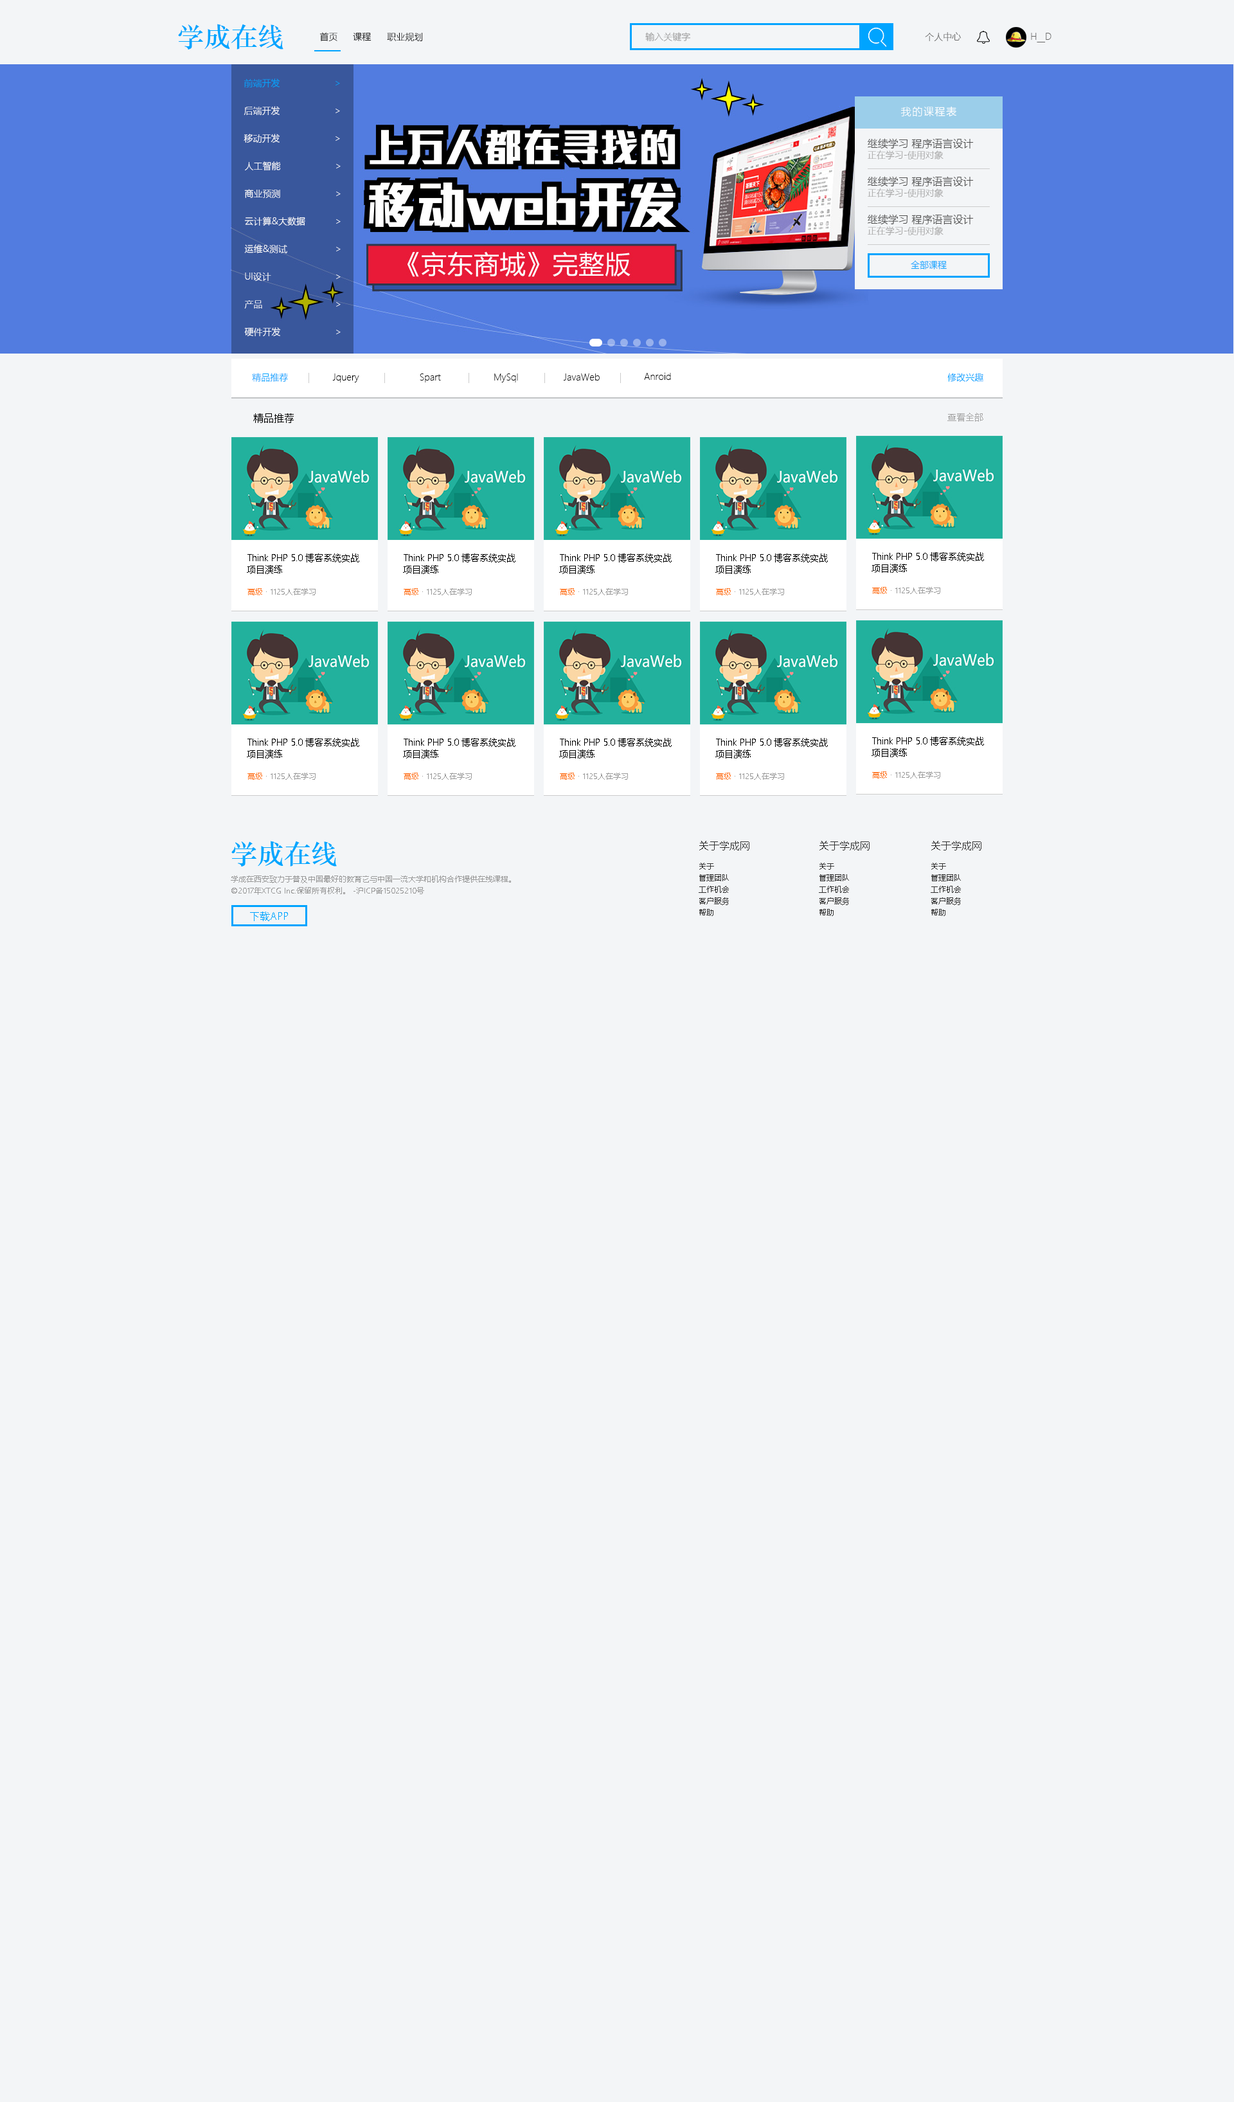
<style>
.page{position:relative;width:1234px;height:2102px;background:#f3f5f7}
.page>*{position:absolute;margin:0}
.t1{font:27px "STZhongsong";color:#00a5ff}
.t2{font:9px "MicrosoftYaHeiLight";color:#050505}
.t3{font:9px "MicrosoftYaHeiLight"}
.t4{font:9px "MicrosoftYaHeiLight";color:#999999}
.t5{font:9px "MicrosoftYaHeiLight";color:#666666}
.t6{font:9px "MicrosoftYaHeiLight";color:#00a4ff}
.t7{font:9px "MicrosoftYaHeiLight";color:#ffffff}
.t8{font:10.3px "MicrosoftYaHeiLight";letter-spacing:0.1em;color:#ffffff}
.t9{font:10.3px/11.6px "MicrosoftYaHeiLight";color:#4e4e4e}
.t10{font:9px/11.6px "MicrosoftYaHeiLight";color:#a5a5a5}
.t11{font:9px "MicrosoftYaHeiLight";color:#000000}
.t12{font:10.3px "MicrosoftYaHeiLight";color:#000000}
.t13{font:9px "MicrosoftYaHeiLight";color:#a5a5a5}
.t14{font:9px/11.6px "MicrosoftYaHeiLight";color:#000000}
.t15{font:7.7px "MicrosoftYaHeiLight";color:#999999}
.t16{font:7.7px "MicrosoftYaHeiLight";color:#ff7c2d}
.t17{font:10.3px "MicrosoftYaHeiLight";color:#333333}
.t18{font:7.7px/11.6px "MicrosoftYaHeiLight";color:#333333}
.t19{font:7.7px/11.6px "MicrosoftYaHeiLight";color:#999999}
.t20{font:10.3px "MicrosoftYaHeiLight";color:#00a4ff}
</style>
<div class="page">
<p class="t1" style="left:178px;top:24px;width:106px;height:26px">学成在线</p>
<p class="t2" style="left:320px;top:32px;width:18px;height:9px">首页</p>
<p class="t3" style="left:353px;top:33px;width:19px;height:8px">课程</p>
<p class="t2" style="left:387px;top:33px;width:36px;height:8px">职业规划</p>
<p class="t4" style="left:645px;top:32px;width:46px;height:9px">输入关键字</p>
<p class="t5" style="left:925px;top:32px;width:36px;height:9px">个人中心</p>
<p class="t5" style="left:1031px;top:33px;width:21px;height:9px">H__D</p>
<p class="t6" style="left:244px;top:78px;width:36px;height:9px">前端开发</p>
<p class="t6" style="left:336px;top:81px;width:4px;height:5px">&gt;</p>
<p class="t7" style="left:244px;top:106px;width:36px;height:9px">后端开发</p>
<p class="t7" style="left:336px;top:109px;width:4px;height:4px">&gt;</p>
<p class="t8" style="left:901px;top:106px;width:56px;height:11px">我的课程表</p>
<p class="t7" style="left:244px;top:134px;width:36px;height:9px">移动开发</p>
<p class="t7" style="left:336px;top:136px;width:4px;height:5px">&gt;</p>
<p class="t9" style="left:868px;top:138px;width:106px;height:21px">继续学习 程序语言设计<br><span class="t10">正在学习-使用对象</span></p>
<p class="t7" style="left:245px;top:161px;width:36px;height:10px">人工智能</p>
<p class="t7" style="left:336px;top:164px;width:5px;height:4px">&gt;</p>
<p class="t9" style="left:868px;top:176px;width:106px;height:21px">继续学习 程序语言设计<br><span class="t10">正在学习-使用对象</span></p>
<p class="t7" style="left:244px;top:189px;width:36px;height:9px">商业预测</p>
<p class="t7" style="left:336px;top:192px;width:5px;height:4px">&gt;</p>
<p class="t7" style="left:244px;top:217px;width:61px;height:9px">云计算&amp;大数据</p>
<p class="t7" style="left:336px;top:219px;width:5px;height:5px">&gt;</p>
<p class="t9" style="left:868px;top:214px;width:106px;height:21px">继续学习 程序语言设计<br><span class="t10">正在学习-使用对象</span></p>
<p class="t7" style="left:244px;top:244px;width:43px;height:9px">运维&amp;测试</p>
<p class="t7" style="left:336px;top:247px;width:5px;height:4px">&gt;</p>
<p class="t3" style="left:911px;top:260px;width:36px;height:9px">全部课程</p>
<p class="t7" style="left:245px;top:273px;width:26px;height:8px">UI设计</p>
<p class="t7" style="left:336px;top:274px;width:5px;height:5px">&gt;</p>
<p class="t7" style="left:244px;top:300px;width:18px;height:9px">产品</p>
<p class="t7" style="left:336px;top:302px;width:5px;height:5px">&gt;</p>
<p class="t7" style="left:244px;top:327px;width:37px;height:9px">硬件开发</p>
<p class="t7" style="left:336px;top:330px;width:5px;height:4px">&gt;</p>
<p class="t6" style="left:252px;top:373px;width:36px;height:9px">精品推荐</p>
<p class="t11" style="left:332px;top:374px;width:27px;height:8px">Jquery</p>
<p class="t11" style="left:420px;top:374px;width:21px;height:8px">Spart</p>
<p class="t11" style="left:494px;top:374px;width:24px;height:8px">MySql</p>
<p class="t11" style="left:564px;top:374px;width:36px;height:7px">JavaWeb</p>
<p class="t11" style="left:644px;top:373px;width:27px;height:7px">Anroid</p>
<p class="t6" style="left:948px;top:373px;width:36px;height:9px">修改兴趣</p>
<p class="t12" style="left:253px;top:413px;width:41px;height:10px">精品推荐</p>
<p class="t13" style="left:948px;top:413px;width:36px;height:9px">查看全部</p>
<p class="t14" style="left:247px;top:554px;width:112px;height:20px">Think PHP 5.0 博客系统实战项目演练</p>
<p class="t14" style="left:403px;top:554px;width:113px;height:20px">Think PHP 5.0 博客系统实战项目演练</p>
<p class="t14" style="left:559px;top:554px;width:113px;height:20px">Think PHP 5.0 博客系统实战项目演练</p>
<p class="t14" style="left:716px;top:554px;width:112px;height:20px">Think PHP 5.0 博客系统实战项目演练</p>
<p class="t14" style="left:872px;top:552px;width:112px;height:21px">Think PHP 5.0 博客系统实战项目演练</p>
<p class="t15" style="left:248px;top:588px;width:68px;height:7px"><span class="t11"> </span><span class="t16">高级 </span>· 1125人在学习</p>
<p class="t15" style="left:404px;top:588px;width:68px;height:7px"><span class="t11"> </span><span class="t16">高级 </span>· 1125人在学习</p>
<p class="t15" style="left:560px;top:588px;width:68px;height:7px"><span class="t11"> </span><span class="t16">高级 </span>· 1125人在学习</p>
<p class="t15" style="left:716px;top:588px;width:68px;height:7px"><span class="t11"> </span><span class="t16">高级 </span>· 1125人在学习</p>
<p class="t15" style="left:872px;top:587px;width:69px;height:7px"><span class="t11"> </span><span class="t16">高级 </span>· 1125人在学习</p>
<p class="t14" style="left:872px;top:737px;width:112px;height:20px">Think PHP 5.0 博客系统实战项目演练</p>
<p class="t14" style="left:247px;top:738px;width:112px;height:21px">Think PHP 5.0 博客系统实战项目演练</p>
<p class="t14" style="left:403px;top:738px;width:113px;height:21px">Think PHP 5.0 博客系统实战项目演练</p>
<p class="t14" style="left:559px;top:738px;width:113px;height:21px">Think PHP 5.0 博客系统实战项目演练</p>
<p class="t14" style="left:716px;top:738px;width:112px;height:21px">Think PHP 5.0 博客系统实战项目演练</p>
<p class="t15" style="left:248px;top:773px;width:68px;height:7px"><span class="t11"> </span><span class="t16">高级 </span>· 1125人在学习</p>
<p class="t15" style="left:404px;top:773px;width:68px;height:7px"><span class="t11"> </span><span class="t16">高级 </span>· 1125人在学习</p>
<p class="t15" style="left:560px;top:773px;width:68px;height:7px"><span class="t11"> </span><span class="t16">高级 </span>· 1125人在学习</p>
<p class="t15" style="left:716px;top:773px;width:68px;height:7px"><span class="t11"> </span><span class="t16">高级 </span>· 1125人在学习</p>
<p class="t15" style="left:872px;top:771px;width:69px;height:8px"><span class="t11"> </span><span class="t16">高级 </span>· 1125人在学习</p>
<p class="t17" style="left:699px;top:841px;width:51px;height:10px">关于学成网</p>
<p class="t17" style="left:820px;top:841px;width:50px;height:10px">关于学成网</p>
<p class="t17" style="left:932px;top:841px;width:50px;height:10px">关于学成网</p>
<p class="t18" style="left:699px;top:863px;width:30px;height:53px">关于<br>管理团队<br>工作机会<br>客户服务<br>帮助</p>
<p class="t18" style="left:819px;top:863px;width:30px;height:53px">关于<br>管理团队<br>工作机会<br>客户服务<br>帮助</p>
<p class="t18" style="left:931px;top:863px;width:30px;height:53px">关于<br>管理团队<br>工作机会<br>客户服务<br>帮助</p>
<p class="t19" style="left:231px;top:876px;width:280px;height:19px">学成在西安致力于普及中国最好的教育它与中国一流大学和机构合作提供在线课程。©2017年XTCG Inc.保留所有权利。 -沪ICP备15025210号</p>
<p class="t20" style="left:250px;top:912px;width:38px;height:9px">下载APP</p>
</div>
